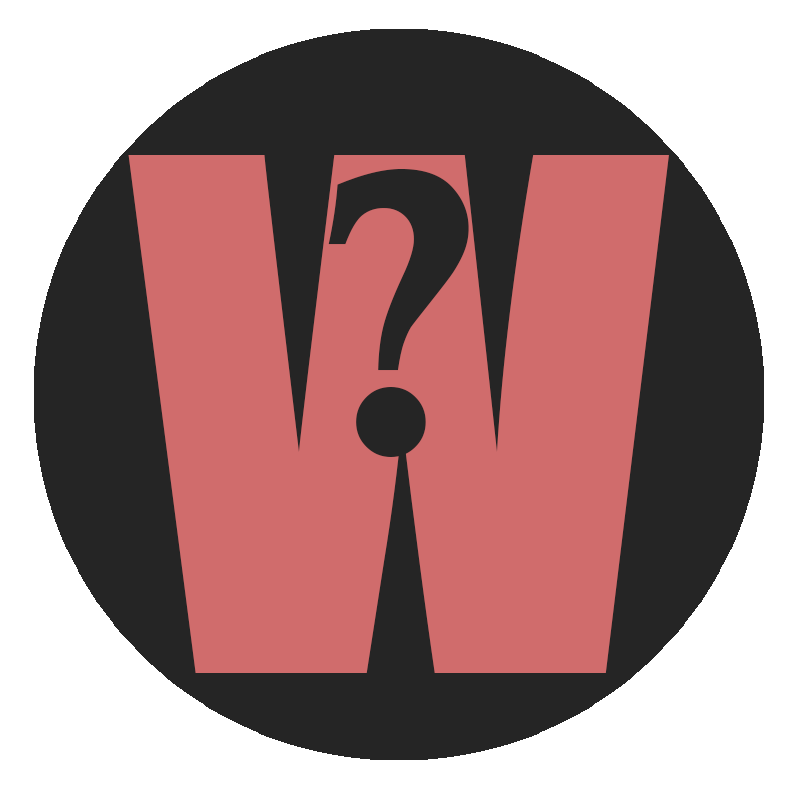
<style>
.page{position:relative;width:800px;height:800px;background:#ffffff}
.page>*{position:absolute;margin:0}
.t1{font:800px "Impact";letter-spacing:-0.02em;color:#d06c6c}
.t2{font:400px "CalisMTBol";letter-spacing:-0.02em;color:#252525}
</style>
<div class="page">
<p class="t1" style="left:128px;top:155px;width:541px;height:518px">w</p>
<p class="t2" style="left:328px;top:169px;width:141px;height:288px">?</p>
</div>
